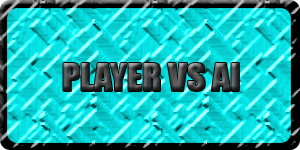
<style>
.page{position:relative;width:300px;height:150px}
.page>*{position:absolute;margin:0}
.t1{font:36px "Impact"}
</style>
<div class="page">
<p class="t1" style="left:63px;top:63px;width:176px;height:28px">PLAYER VS AI</p>
</div>
